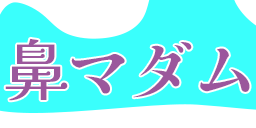
<style>
.page{position:relative;width:256px;height:128px;background:#3afffc}
.page>*{position:absolute;margin:0}
.t1{font:66px "KaiseiTokumin-Medium";letter-spacing:-0.05em;color:#9b579c}
</style>
<div class="page">
<p class="t1" style="left:5px;top:38px;width:245px;height:63px">鼻マダム</p>
</div>
